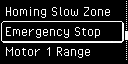
<style>
.page{position:relative;width:128px;height:64px;background:#000000}
.page>*{position:absolute;margin:0}
.t1{font:16px "PixelOperator";color:#ffffff}
</style>
<div class="page">
<p class="t1" style="left:5px;top:7px;width:105px;height:11px">Homing Slow Zone</p>
<p class="t1" style="left:5px;top:27px;width:95px;height:11px">Emergency Stop</p>
<p class="t1" style="left:6px;top:47px;width:85px;height:11px">Motor 1 Range</p>
</div>
